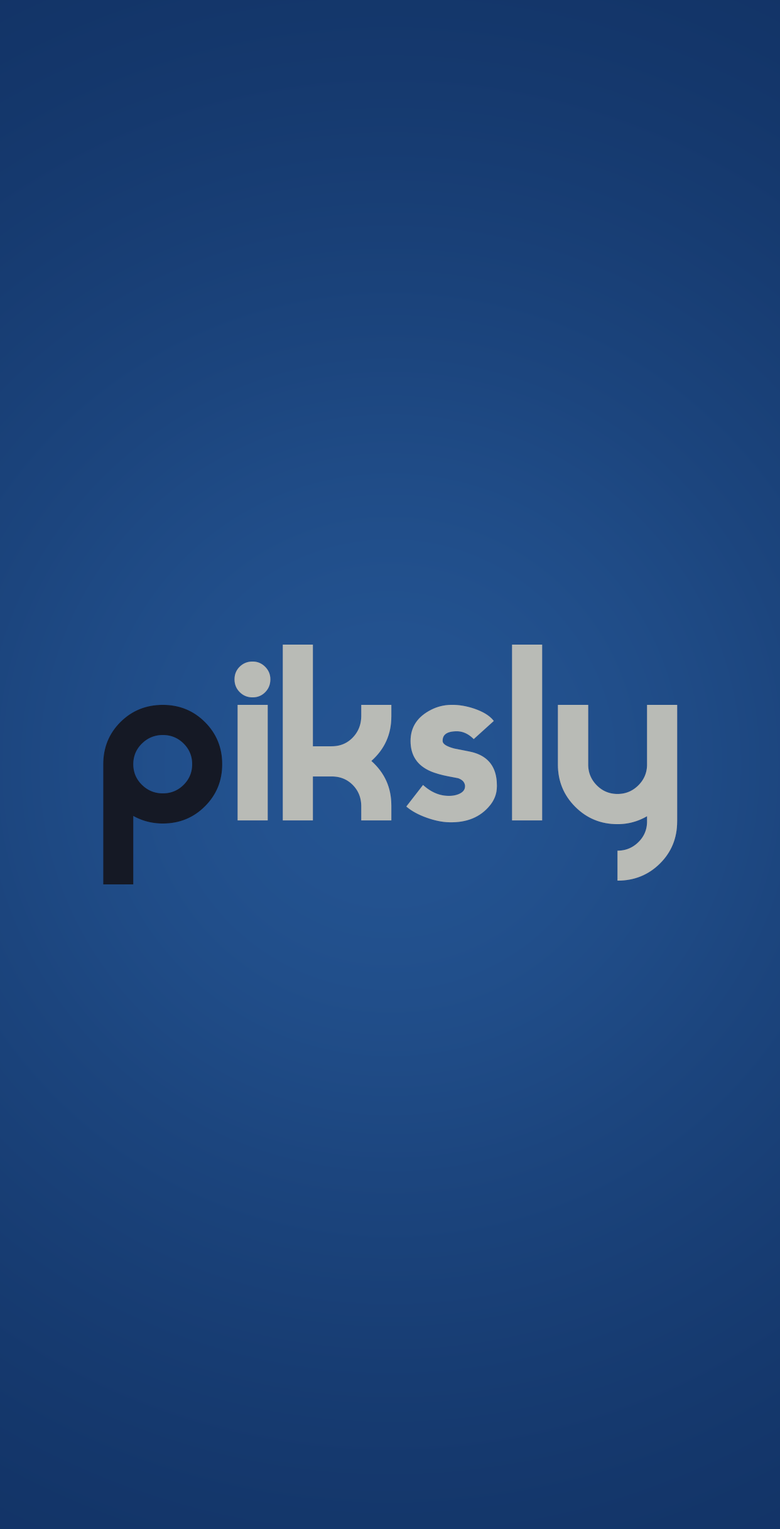
<style>
.page{position:relative;width:780px;height:1529px}
.page>*{position:absolute;margin:0}
.t1{font:222.2px "Moderna";color:#b9bbb6}
.t2{font:222.2px "Moderna";color:#151925}
</style>
<div class="page">
<p class="t1" style="left:103px;top:645px;width:574px;height:240px"><span class="t2">p</span>iksly</p>
</div>
